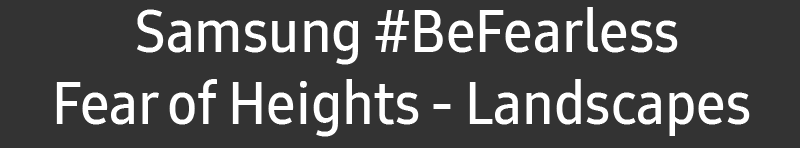
<style>
.page{position:relative;width:800px;height:148px;background:#333333}
.page>*{position:absolute;margin:0}
.t1{font:59.6px "SamsungOne-600C";color:#ffffff}
</style>
<div class="page">
<p class="t1" style="left:56px;top:7px;width:694px;height:130px;text-align:center">Samsung #BeFearless<br>Fear of Heights - Landscapes</p>
</div>
